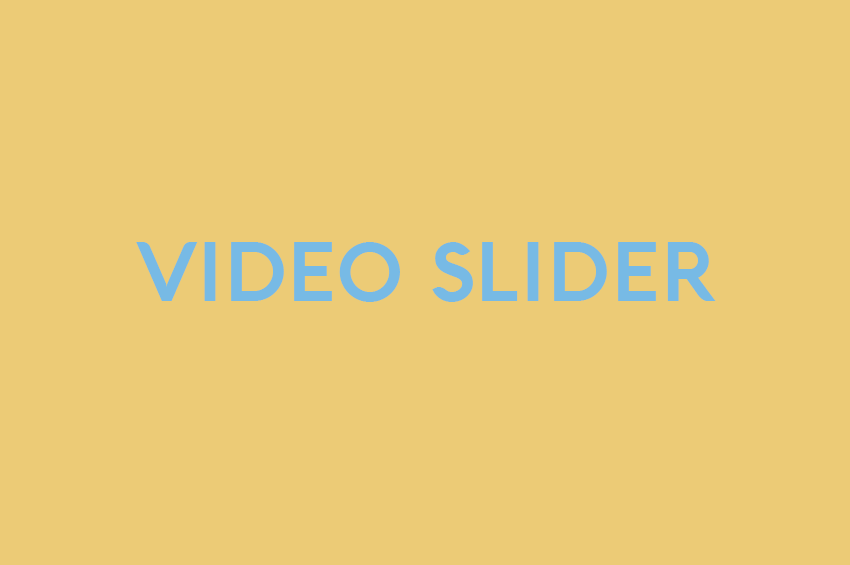
<style>
.page{position:relative;width:850px;height:565px;background:#eccb76}
.page>*{position:absolute;margin:0}
.t1{font:82px "Aquawax-Bold";color:#77bae5}
</style>
<div class="page">
<p class="t1" style="left:136px;top:242px;width:580px;height:60px">VIDEO SLIDER</p>
</div>
